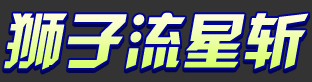
<style>
.page{position:relative;width:312px;height:82px;background:#333333}
.page>*{position:absolute;margin:0}
.t1{font:60px "HYk2gj";font-style:italic}
</style>
<div class="page">
<p class="t1" style="left:4px;top:12px;width:305px;height:58px">狮子流星斩</p>
</div>
